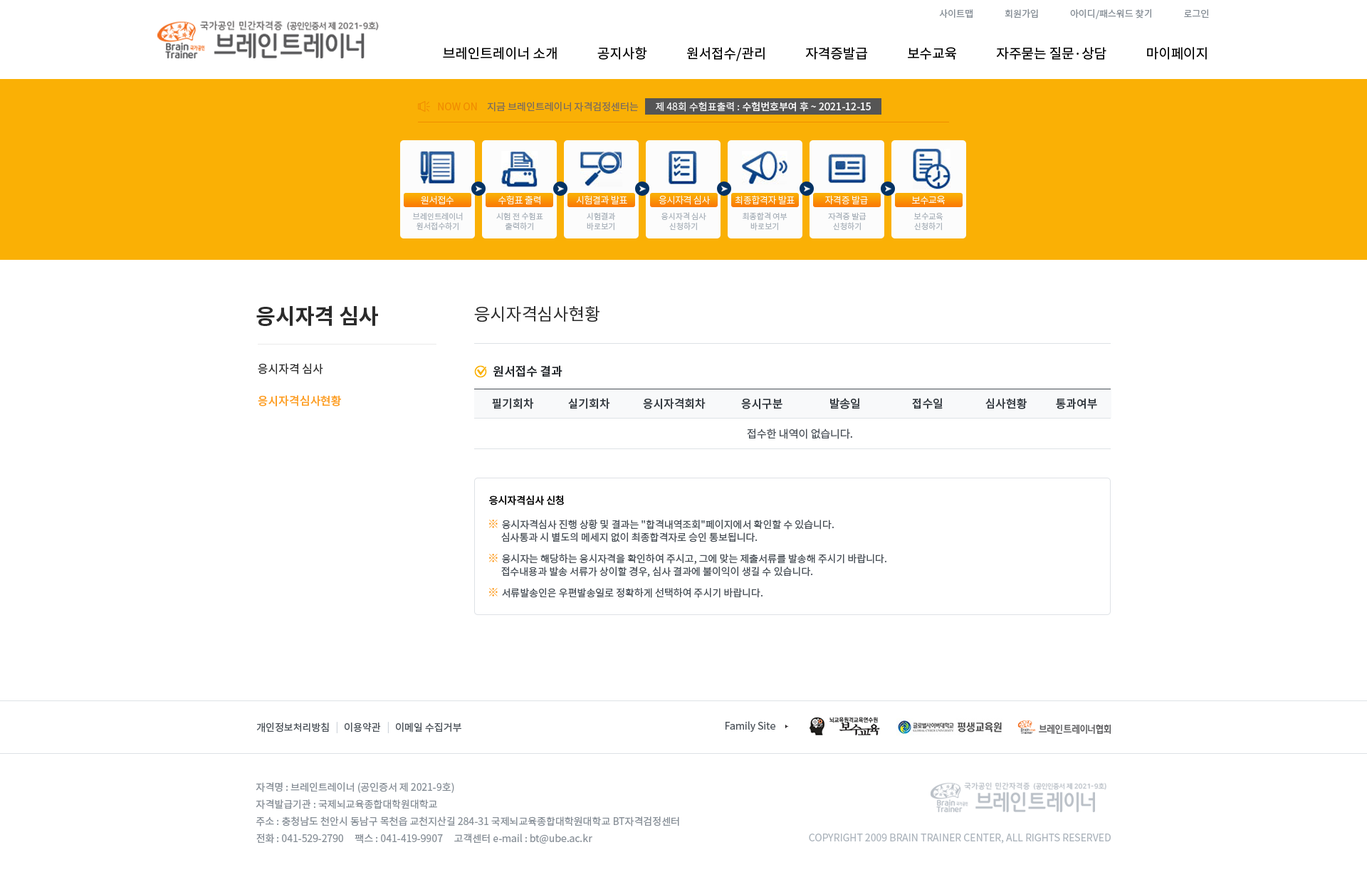
<style>
.page{position:relative;width:1367px;height:872px;background:#ffffff}
.page>*{position:absolute;margin:0}
.t1{font:9.3px "NotoSansCJKkr-Regular";letter-spacing:0.001em;color:#868e96}
.t2{font:13.5px "NotoSansCJKkr-Regular";color:#000000}
.t3{font:10px "NotoSansCJKkr-Regular";color:#7c6d5d}
.t4{font:10px "NotoSansCJKkr-Medium";color:#f8f8f8}
.t5{font:10px "NotoSansCJKkr-Regular";color:#f8f8f8}
.t6{font:10px "NotoSansCJKkr-Regular";color:#f08c00}
.t7{font:9.3px "NotoSansCJKkr-Light";letter-spacing:-0.025em;color:#fcfcfc}
.t8{font:7.8px/10px "NotoSansCJKkr-Regular";color:#adb5bd}
.t9{font:21.4px "NotoSansCJKkr-Bold";color:#2b2b2b}
.t10{font:17.1px "NotoSansCJKkr-Regular";color:#2b2b2b}
.t11{font:11.4px "NotoSansCJKkr-Regular";color:#2b2b2b}
.t12{font:12.1px "NotoSansCJKkr-Medium";color:#212529}
.t13{font:11.4px "NotoSansCJKkr-Medium";color:#fd9f27}
.t14{font:11.4px "NotoSansCJKkr-Medium";color:#343a40}
.t15{font:10.7px "NotoSansCJKkr-Regular";color:#495057;text-transform:uppercase}
.t16{font:10px "NotoSansCJKkr-Medium";color:#000000}
.t17{font:10px/12.8px "NotoSansCJKkr-Regular";color:#495057}
.t18{font:11.4px/12.8px "NotoSansCJKkr-Regular";color:#fd9f27}
.t19{font:10px "NotoSansCJKkr-Regular";color:#495057}
.t20{font:11.4px "NotoSansCJKkr-Regular";color:#fd9f27}
.t21{font:10px "NotoSansCJKkr-Regular";color:#ced4da}
.t22{font:10px/17.1px "NotoSansCJKkr-Regular";color:#868e96}
.t23{font:10px "NotoSansCJKkr-Regular";color:#adb5bd}
</style>
<div class="page">
<p class="t1" style="left:939px;top:9px;width:270px;height:10px">사이트맵               회원가입               아이디/패스워드 찾기               로그인</p>
<p class="t2" style="left:443px;top:46px;width:764px;height:15px">브레인트레이너 소개             공지사항             원서접수/관리             자격증발급             보수교육             자주묻는 질문·상담             마이페이지</p>
<p class="t3" style="left:487px;top:102px;width:152px;height:10px">지금 브레인트레이너 자격검정센터는</p>
<p class="t4" style="left:656px;top:102px;width:215px;height:10px"><span class="t5">제 48회 수험표출력 : </span>수험번호부여 후 ~ 2021-12-15</p>
<p class="t6" style="left:438px;top:103px;width:39px;height:7px">NOW ON</p>
<p class="t7" style="left:421px;top:196px;width:33px;height:9px">원서접수</p>
<p class="t7" style="left:498px;top:195px;width:42px;height:10px">수험표 출력</p>
<p class="t7" style="left:576px;top:195px;width:51px;height:9px">시험결과 발표</p>
<p class="t7" style="left:659px;top:195px;width:52px;height:10px">응시자격 심사</p>
<p class="t7" style="left:735px;top:195px;width:60px;height:10px">최종합격자 발표</p>
<p class="t7" style="left:825px;top:195px;width:43px;height:10px">자격증 발급</p>
<p class="t7" style="left:911px;top:196px;width:34px;height:9px">보수교육</p>
<p class="t8" style="left:413px;top:212px;width:50px;height:19px;text-align:center">브레인트레이너<br>원서접수하기</p>
<p class="t8" style="left:496px;top:212px;width:47px;height:19px;text-align:center">시험 전 수험표<br>출력하기</p>
<p class="t8" style="left:587px;top:212px;width:28px;height:19px;text-align:center">시험결과<br>바로보기</p>
<p class="t8" style="left:661px;top:212px;width:45px;height:19px;text-align:center">응시자격 심사<br>신청하기</p>
<p class="t8" style="left:743px;top:212px;width:45px;height:19px;text-align:center">최종합격 여부<br>바로보기</p>
<p class="t8" style="left:828px;top:212px;width:39px;height:19px;text-align:center">자격증 발급<br>신청하기</p>
<p class="t8" style="left:914px;top:212px;width:29px;height:19px;text-align:center">보수교육<br>신청하기</p>
<p class="t9" style="left:256px;top:305px;width:122px;height:21px">응시자격 심사</p>
<p class="t10" style="left:474px;top:306px;width:126px;height:16px">응시자격심사현황</p>
<p class="t11" style="left:258px;top:363px;width:65px;height:12px">응시자격 심사</p>
<p class="t12" style="left:493px;top:365px;width:70px;height:12px">원서접수 결과</p>
<p class="t13" style="left:258px;top:395px;width:83px;height:12px">응시자격심사현황</p>
<p class="t14" style="left:492px;top:398px;width:42px;height:11px">필기회차</p>
<p class="t14" style="left:568px;top:398px;width:42px;height:11px">실기회차</p>
<p class="t14" style="left:643px;top:398px;width:63px;height:11px">응시자격회차</p>
<p class="t14" style="left:741px;top:399px;width:42px;height:10px">응시구분</p>
<p class="t14" style="left:830px;top:398px;width:30px;height:11px">발송일</p>
<p class="t14" style="left:912px;top:398px;width:31px;height:11px">접수일</p>
<p class="t14" style="left:985px;top:398px;width:42px;height:11px">심사현황</p>
<p class="t14" style="left:1056px;top:398px;width:41px;height:11px">통과여부</p>
<p class="t15" style="left:747px;top:429px;width:105px;height:10px">접수한 내역이 없습니다.</p>
<p class="t16" style="left:489px;top:496px;width:75px;height:10px">응시자격심사 신청</p>
<p class="t17" style="left:489px;top:519px;width:345px;height:24px"><span class="t18">※ </span>응시자격심사 진행 상황 및 결과는 "합격내역조회"페이지에서 확인할 수 있습니다.<br>      심사통과 시 별도의 메세지 없이 최종합격자로 승인 통보됩니다.</p>
<p class="t17" style="left:489px;top:554px;width:397px;height:23px"><span class="t18">※ </span>응시자는 해당하는 응시자격을 확인하여 주시고, 그에 맞는 제출서류를 발송해 주시기 바랍니다.<br>      접수내용과 발송 서류가 상이할 경우, 심사 결과에 불이익이 생길 수 있습니다.</p>
<p class="t19" style="left:489px;top:588px;width:274px;height:10px"><span class="t20">※ </span>서류발송인은 우편발송일로 정확하게 선택하여 주시기 바랍니다.</p>
<p class="t19" style="left:256px;top:723px;width:73px;height:10px">개인정보처리방침</p>
<p class="t21" style="left:336px;top:722px;width:2px;height:11px">|</p>
<p class="t19" style="left:345px;top:723px;width:36px;height:10px">이용약관</p>
<p class="t21" style="left:387px;top:722px;width:2px;height:11px">|</p>
<p class="t19" style="left:396px;top:723px;width:65px;height:10px">이메일 수집거부</p>
<p class="t19" style="left:726px;top:721px;width:49px;height:11px">Family Site</p>
<p class="t22" style="left:256px;top:783px;width:423px;height:61px">자격명 : 브레인트레이너 (공인증서 제 2021-9호)<br>자격발급기관 : 국제뇌교육종합대학원대학교<br>주소 : 충청남도 천안시 동남구 목천읍 교천지산길 284-31 국제뇌교육종합대학원대학교 BT자격검정센터<br>전화 : 041-529-2790     팩스 : 041-419-9907     고객센터 e-mail : bt@ube.ac.kr</p>
<p class="t23" style="left:809px;top:834px;width:302px;height:10px">COPYRIGHT 2009 BRAIN TRAINER CENTER, ALL RIGHTS RESERVED</p>
</div>
